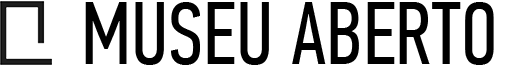
<style>
.page{position:relative;width:520px;height:66px;background:#ffffff}
.page>*{position:absolute;margin:0}
.t1{font:89px "PFDinTextCompPro-Regular";color:#000000;text-transform:uppercase}
</style>
<div class="page">
<p class="t1" style="left:85px;top:2px;width:409px;height:63px">MUSEU ABERTO</p>
</div>
